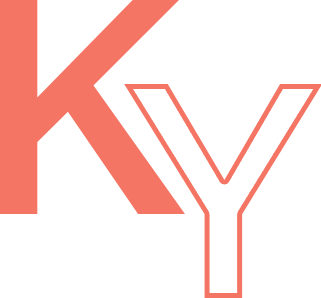
<style>
.page{position:relative;width:321px;height:298px;background:#ffffff}
.page>*{position:absolute;margin:0}
.t1{font:300px "HelveticaNeue-Medium";letter-spacing:0.025em;color:#f47563}
</style>
<div class="page">
<p class="t1" style="left:0px;top:0px;width:185px;height:214px">K</p>
</div>
